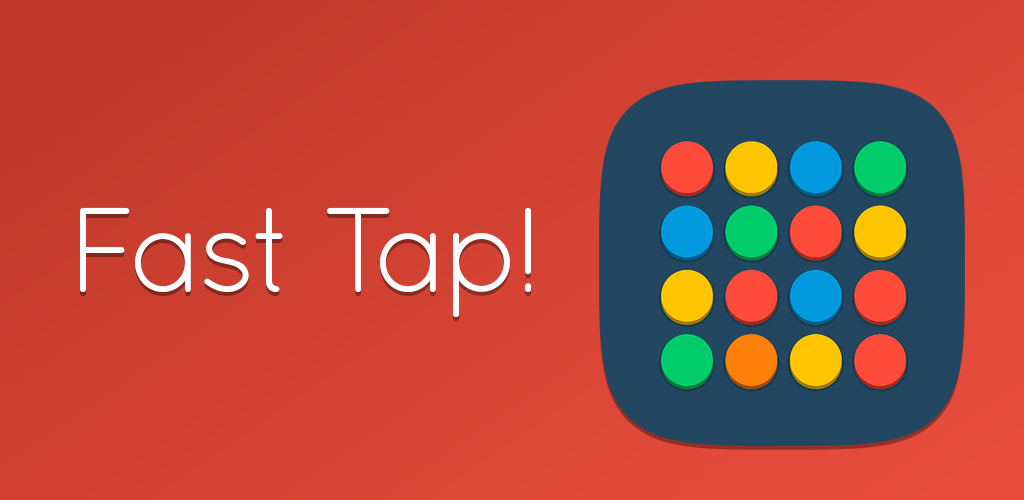
<style>
.page{position:relative;width:1024px;height:500px}
.page>*{position:absolute;margin:0}
.t1{font:120px "Quicksand-Regular";letter-spacing:-0.06em;color:#ffffff}
</style>
<div class="page">
<p class="t1" style="left:80px;top:207px;width:451px;height:110px">Fast Tap!</p>
</div>
